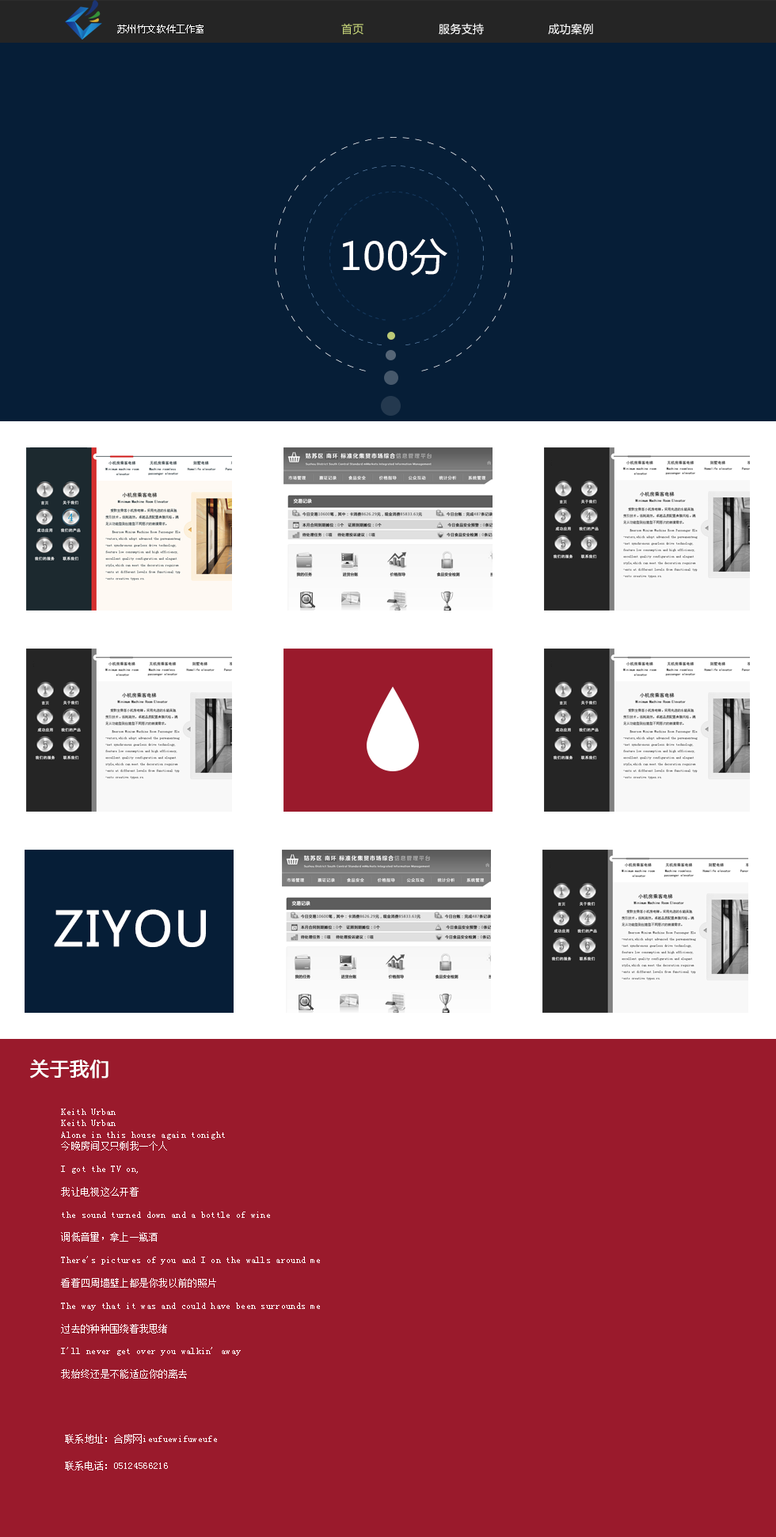
<style>
.page{position:relative;width:776px;height:1537px;background:#9a1a2c}
.page>*{position:absolute;margin:0}
.t1{font:9.5px "MicrosoftYaHei";letter-spacing:0.025em;color:#fefefe}
.t2{font:11.1px "MicrosoftYaHei";letter-spacing:0.025em;color:#ffffff;text-transform:uppercase}
.t3{font:11.1px "MicrosoftYaHei";letter-spacing:0.025em;color:#c6d47a}
.t4{font:38px "MicrosoftYaHei";letter-spacing:0.025em;color:#ffffff}
.t5{font:47.5px "MicrosoftYaHei";letter-spacing:0.025em;color:#ffffff;text-transform:uppercase;font-weight:bold}
.t6{font:19px "MicrosoftYaHei";letter-spacing:0.025em;color:#ffffff;text-transform:uppercase;font-weight:bold}
.t7{font:9.5px "SimSun";letter-spacing:0.025em;color:#ffffff}
</style>
<div class="page">
<p class="t1" style="left:117px;top:25px;width:86px;height:8px">苏州竹文软件工作室</p>
<p class="t2" style="left:341px;top:23px;width:252px;height:12px"><span class="t3">首页                     </span>服务支持                  成功案例</p>
<p class="t4" style="left:343px;top:238px;width:104px;height:38px">100分</p>
<p class="t5" style="left:54px;top:909px;width:152px;height:38px">ziyou</p>
<p class="t6" style="left:30px;top:1059px;width:78px;height:19px">关于我们</p>
<p class="t7" style="left:61px;top:1108px;width:259px;height:270px">Keith Urban<br>Keith Urban<br>Alone in this house again tonight<br>今晚房间又只剩我一个人<br><br>I got the TV on,<br><br>我让电视这么开着<br><br>the sound turned down and a bottle of wine<br><br>调低音量，拿上一瓶酒<br><br>There's pictures of you and I on the walls around me<br><br>看着四周墙壁上都是你我以前的照片<br><br>The way that it was and could have been surrounds me<br><br>过去的种种围绕着我思绪<br><br>I'll never get over you walkin' away<br><br>我始终还是不能适应你的离去</p>
<p class="t7" style="left:65px;top:1434px;width:152px;height:9px">联系地址：合房网ieufuewifuweufe</p>
<p class="t7" style="left:65px;top:1461px;width:103px;height:9px">联系电话：05124566216</p>
</div>
